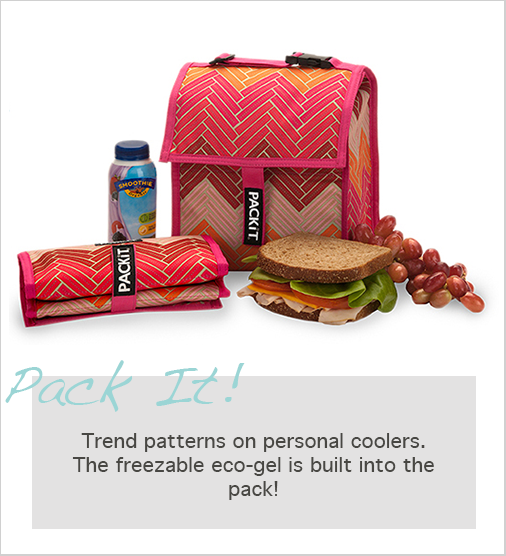
<style>
.page{position:relative;width:506px;height:556px;background:#ffffff}
.page>*{position:absolute;margin:0}
.t1{font:56px "Handwriting-Dakota";color:#9bd5d5}
.t2{font:20px "Geneva";color:#484743}
</style>
<div class="page">
<p class="t1" style="left:5px;top:360px;width:240px;height:52px">Pack It!</p>
<p class="t2" style="left:72px;top:433px;width:362px;height:67px;text-align:center">Trend patterns on personal coolers.  The freezable eco-gel is built into the pack!</p>
</div>
